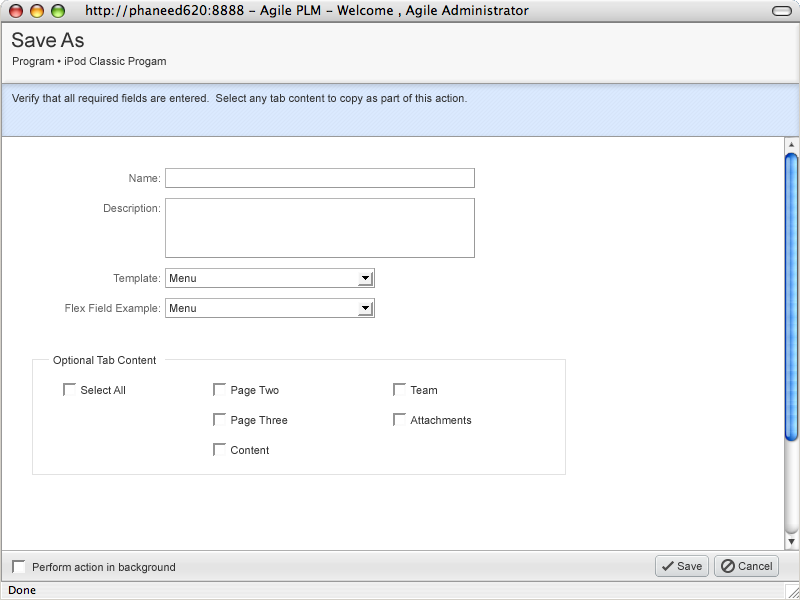
<style>
.page{position:relative;width:800px;height:600px;background:#ffffff}
.page>*{position:absolute;margin:0}
.t1{font:20px "ArialMT";color:#333333}
.t2{font:11px "ArialMT";color:#333333}
.t3{font:11px "ArialMT";color:#666666}
.t4{font:11px/30px "ArialMT";color:#333333}
</style>
<div class="page">
<p class="t1" style="left:12px;top:32px;width:72px;height:16px">Save As</p>
<p class="t2" style="left:13px;top:57px;width:153px;height:11px">Program • iPod Classic Progam</p>
<p class="t2" style="left:12px;top:94px;width:455px;height:11px">Verify that all required fields are entered.  Select any tab content to copy as part of this action.</p>
<p class="t3" style="left:129px;top:174px;width:31px;height:8px">Name:</p>
<p class="t3" style="left:104px;top:204px;width:56px;height:11px">Description:</p>
<p class="t3" style="left:113px;top:274px;width:47px;height:11px">Template:</p>
<p class="t2" style="left:170px;top:274px;width:26px;height:8px">Menu</p>
<p class="t3" style="left:65px;top:304px;width:95px;height:11px">Flex Field Example:</p>
<p class="t2" style="left:170px;top:304px;width:26px;height:8px">Menu</p>
<p class="t2" style="left:53px;top:356px;width:103px;height:11px">Optional Tab Content</p>
<p class="t2" style="left:81px;top:386px;width:44px;height:8px">Select All</p>
<p class="t4" style="left:231px;top:386px;width:57px;height:68px">Page Two<br>Page Three<br>Content</p>
<p class="t4" style="left:410px;top:386px;width:62px;height:38px">Team<br>Attachments</p>
<p class="t2" style="left:33px;top:563px;width:142px;height:11px">Perform action in background</p>
<p class="t2" style="left:677px;top:562px;width:25px;height:8px">Save</p>
<p class="t2" style="left:738px;top:562px;width:34px;height:8px">Cancel</p>
</div>
